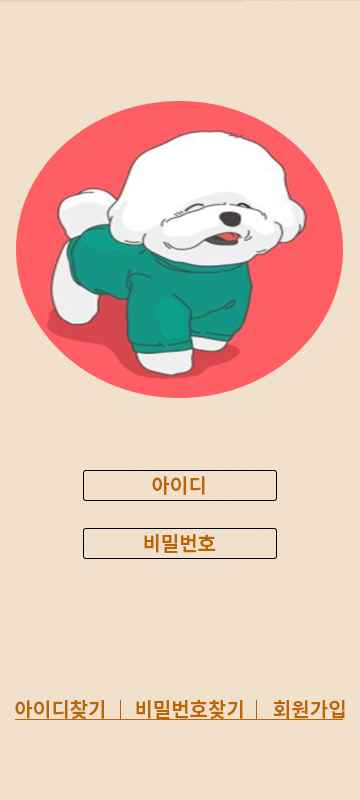
<style>
.page{position:relative;width:360px;height:800px;background:#f1e0cc}
.page>*{position:absolute;margin:0}
.t1{font:20px "NotoSansMonoCJKkr-Bold";color:#bb6600}
.t2{font:20.2px "NotoSansMonoCJKkr-Bold";color:#bb6600}
</style>
<div class="page">
<p class="t1" style="left:152px;top:476px;width:53px;height:19px">아이디</p>
<p class="t1" style="left:144px;top:534px;width:72px;height:19px">비밀번호</p>
<p class="t2" style="left:15px;top:700px;width:89px;height:19px">아이디찾기</p>
<p class="t2" style="left:136px;top:699px;width:107px;height:20px">비밀번호찾기</p>
<p class="t2" style="left:273px;top:700px;width:72px;height:19px">회원가입</p>
</div>
